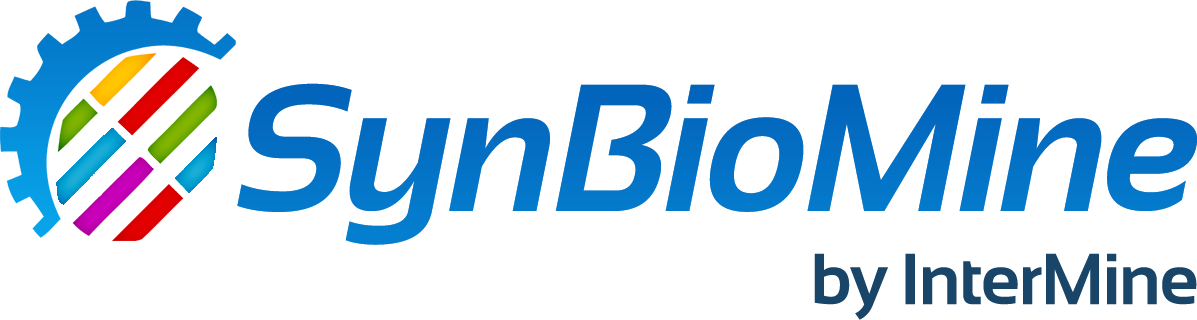
<style>
.page{position:relative;width:1197px;height:320px;background:#ffffff}
.page>*{position:absolute;margin:0}
.t1{font:180.7px "Sansation-Bold-Italic";letter-spacing:-0.025em;color:#0370c4}
.t2{font:72.3px "Sansation-Bold";letter-spacing:-0.025em;color:#184568}
</style>
<div class="page">
<p class="t1" style="left:237px;top:83px;width:960px;height:162px">SynBioMine</p>
<p class="t1" style="left:237px;top:83px;width:960px;height:162px">SynBioMine</p>
<p class="t2" style="left:814px;top:253px;width:383px;height:67px">by InterMine</p>
</div>
